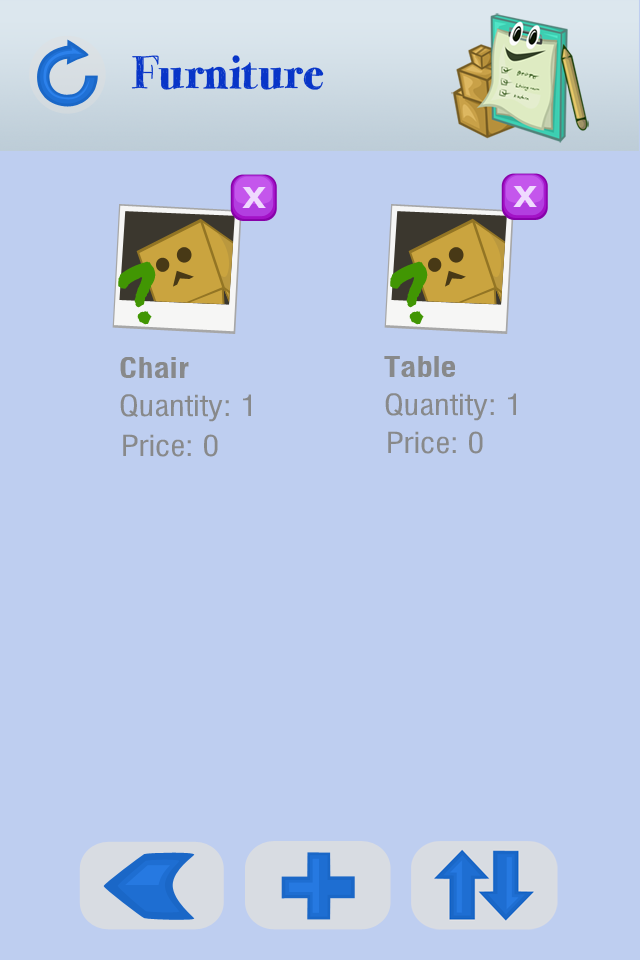
<style>
.page{position:relative;width:640px;height:960px;background:#becef0}
.page>*{position:absolute;margin:0}
.t1{font:47.2px "MomsDiner";color:#0835c8}
.t2{font:28.3px "MilfordBold";color:#88898a}
.t3{font:28.3px "Milford";color:#88898a}
</style>
<div class="page">
<p class="t1" style="left:131px;top:55px;width:193px;height:35px">Furniture</p>
<p class="t2" style="left:120px;top:357px;width:69px;height:21px">Chair</p>
<p class="t2" style="left:384px;top:356px;width:71px;height:21px">Table</p>
<p class="t3" style="left:120px;top:394px;width:131px;height:28px">Quantity: 1</p>
<p class="t3" style="left:385px;top:393px;width:131px;height:28px">Quantity: 1</p>
<p class="t3" style="left:123px;top:434px;width:95px;height:23px">Price: 0</p>
<p class="t3" style="left:388px;top:431px;width:95px;height:23px">Price: 0</p>
</div>
